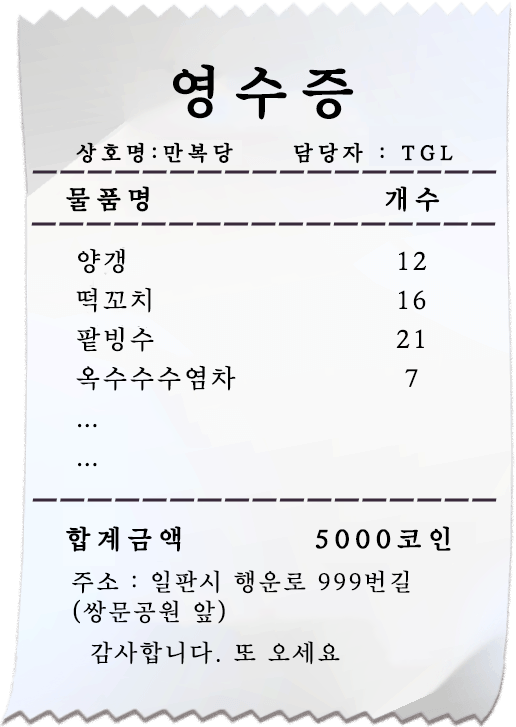
<style>
.page{position:relative;width:516px;height:727px}
.page>*{position:absolute;margin:0}
.t1{font:56px "YESMyoungjo-Regular";letter-spacing:0.22em;color:#000000;font-weight:bold}
.t2{font:21px "YESMyoungjo-Regular";letter-spacing:0.22em;color:#000000;font-weight:bold}
.t3{font:26px "YESMyoungjo-Regular";letter-spacing:0.22em;color:#000000;font-weight:bold}
.t4{font:26px/39px "YESMyoungjo-Regular";letter-spacing:0.1em;color:#000000}
.t5{font:24px/41px "YESMyoungjo-Regular";letter-spacing:0.1em;color:#000000}
.t6{font:24px/30px "YESMyoungjo-Regular";letter-spacing:0.1em;color:#000000}
</style>
<div class="page">
<p class="t1" style="left:173px;top:64px;width:181px;height:56px">영수증</p>
<p class="t2" style="left:76px;top:142px;width:377px;height:22px">상호명:만복당     담당자 : TGL</p>
<p class="t3" style="left:66px;top:186px;width:83px;height:26px">물품명</p>
<p class="t3" style="left:385px;top:186px;width:55px;height:26px">개수</p>
<p class="t4" style="left:76px;top:248px;width:160px;height:219px">양갱<br>떡꼬치<br>팥빙수<br>옥수수수염차<br>…<br>…</p>
<p class="t4" style="left:396px;top:251px;width:30px;height:136px;text-align:center">12<br>16<br>21<br>7</p>
<p class="t3" style="left:66px;top:526px;width:115px;height:26px">합계금액</p>
<p class="t3" style="left:315px;top:526px;width:136px;height:25px">5000코인</p>
<p class="t5" style="left:72px;top:570px;width:338px;height:95px"><span class="t6">주소 : 일판시 행운로 999번길<br></span>(쌍문공원 앞)<br>  감사합니다. 또 오세요</p>
</div>
